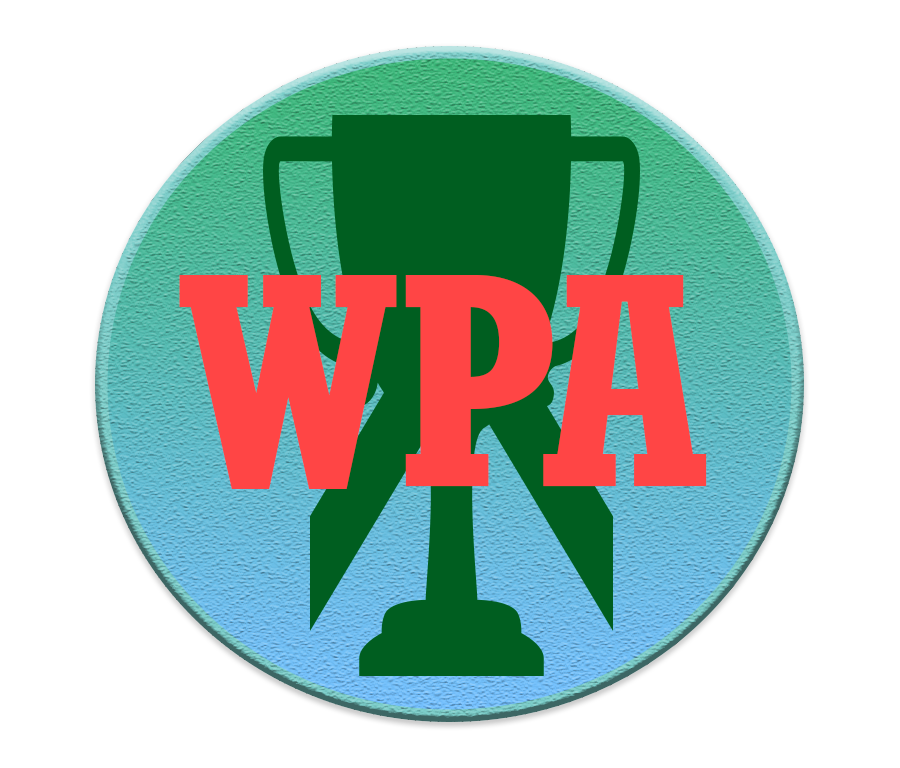
<style>
.page{position:relative;width:900px;height:768px;background:#ffffff}
.page>*{position:absolute;margin:0}
.t1{font:300px "Rockwell-CondensedBold";color:#ff4545}
</style>
<div class="page">
<p class="t1" style="left:179px;top:275px;width:528px;height:214px">WPA</p>
</div>
